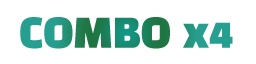
<style>
.page{position:relative;width:256px;height:64px;background:#ffffff}
.page>*{position:absolute;margin:0}
.t1{font:40px "BlackHanSans-Regular"}
</style>
<div class="page">
<p class="t1" style="left:20px;top:17px;width:213px;height:32px">COMBO x4</p>
</div>
